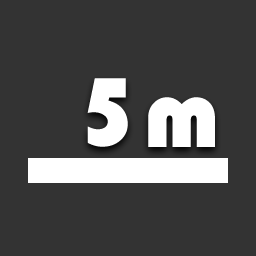
<style>
.page{position:relative;width:256px;height:256px;background:#333333}
.page>*{position:absolute;margin:0}
.t1{font:100px "Bauhaus93";color:#ffffff}
</style>
<div class="page">
<p class="t1" style="left:87px;top:78px;width:41px;height:69px">5</p>
<p class="t1" style="left:148px;top:97px;width:67px;height:50px">m</p>
</div>
